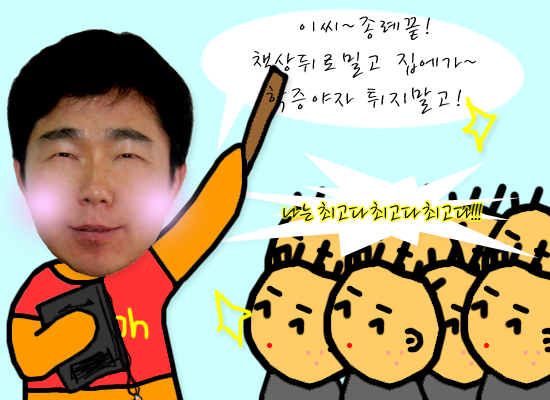
<style>
.page{position:relative;width:550px;height:400px;background:#ccffff}
.page>*{position:absolute;margin:0}
.t1{font:30px/36px "YDBomnalL";letter-spacing:0.05em;color:#000000}
.t2{font:30px "YDBomnalL";letter-spacing:-0.1em;color:#000000;scale:0.9 1}
</style>
<div class="page">
<p class="t1" style="left:252px;top:16px;width:224px;height:98px;text-align:center">이씨~종례끝!<br>책상뒤로밀고 집에가~<br>학증야자 튀지말고!</p>
<p class="t2" style="left:283px;top:202px;width:199px;height:19px">나는 최고다 최고다 최고다!!!</p>
</div>
